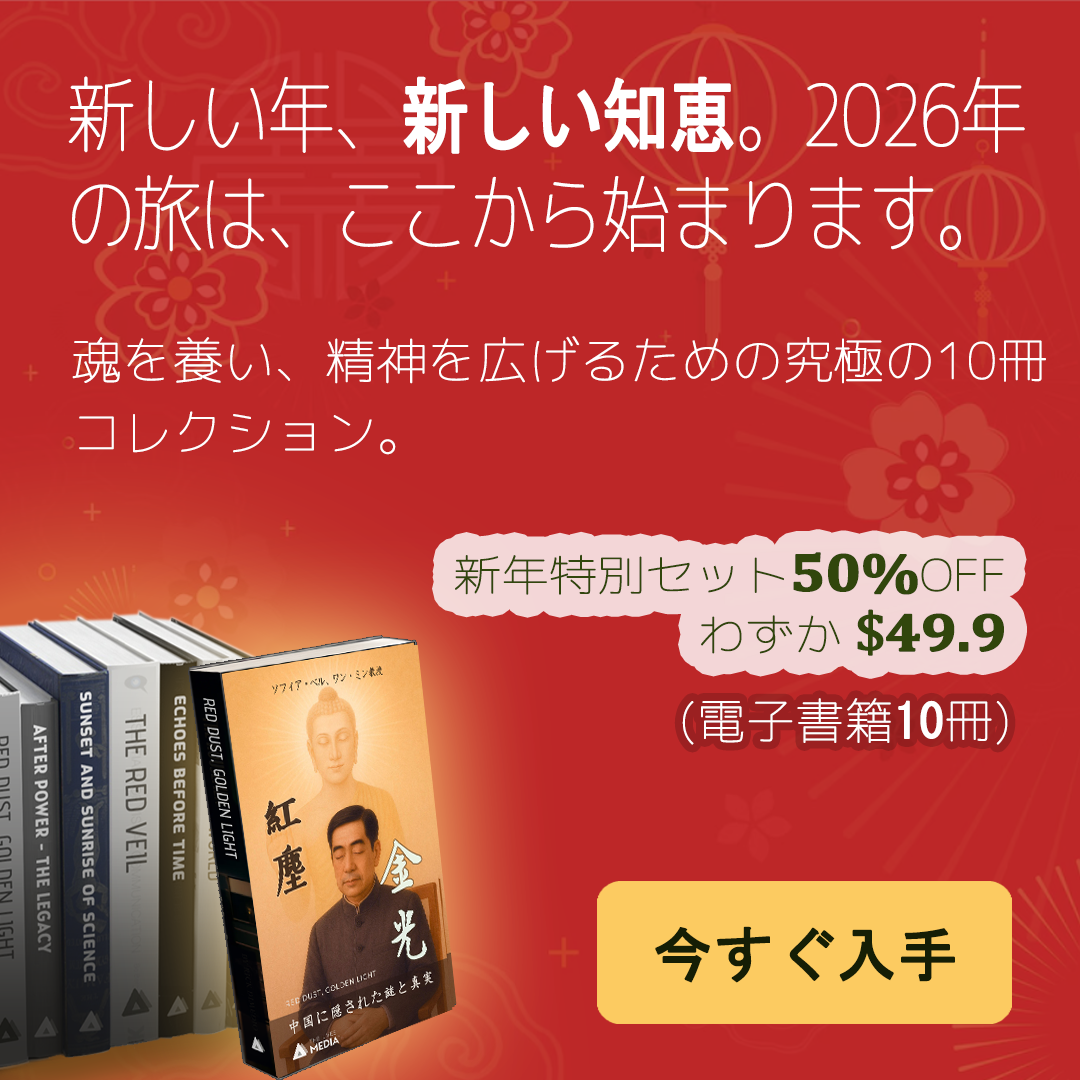
<style>
.page{position:relative;width:1080px;height:1080px;background:#bd2728}
.page>*{position:absolute;margin:0}
.t1{font:83.6px/99px "Chogokuboso-Gothic";letter-spacing:-0.05em;color:#ffffff;font-weight:bold;scale:0.82 1}
.t2{font:83.6px/99px "MS-Gothic";letter-spacing:-0.05em;color:#ffffff;font-weight:bold;scale:0.82 1}
.t3{font:49.5px/72px "Chogokuboso-Gothic";color:#ffffff;font-weight:bold}
.t4{font:43.2px/60px "Chogokuboso-Gothic";letter-spacing:-0.025em;color:#31460c;font-weight:bold;scale:1.11 1}
.t5{font:54px/60px "Cambria-Bold";letter-spacing:-0.025em;color:#31460c;font-weight:bold;scale:1.11 1}
.t6{font:54px/60px "Cambria";letter-spacing:-0.025em;color:#31460c;font-weight:bold;scale:1.11 1}
.t7{font:48px "Chogokuboso-Gothic";color:#ffffff;font-weight:bold}
.t8{font:48px "MS-Gothic";color:#ffffff;font-weight:bold}
.t9{font:60px "MS-Gothic";letter-spacing:-0.005em;color:#151e05;font-weight:bold}
</style>
<div class="page">
<p class="t1" style="left:68px;top:76px;width:957px;height:177px">新しい年、<span class="t2">新しい知恵</span>。2026年の旅は、ここから始まります。</p>
<p class="t3" style="left:72px;top:336px;width:974px;height:119px">魂を養い、精神を広げるための究極の10冊コレクション。</p>
<p class="t4" style="left:455px;top:552px;width:549px;height:104px;text-align:right">新年特別セット<span class="t5">50%</span>OFF <br>わずか<span class="t6"> $</span><span class="t5">49.9</span></p>
<p class="t7" style="left:682px;top:698px;width:326px;height:47px">(電子書籍<span class="t8">10</span>冊)</p>
<p class="t9" style="left:655px;top:926px;width:300px;height:57px">今すぐ入手</p>
</div>
